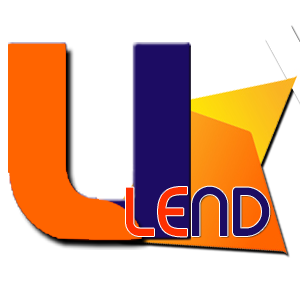
<style>
.page{position:relative;width:300px;height:300px;background:#ffffff}
.page>*{position:absolute;margin:0}
.t1{font:63.8px "PrestijDemo-Bold";color:#ff3000}
.t2{font:63.8px "PrestijDemo-Bold";color:#1c0c63}
</style>
<div class="page">
<p class="t1" style="left:126px;top:186px;width:144px;height:51px">LE<span class="t2">ND</span></p>
</div>
